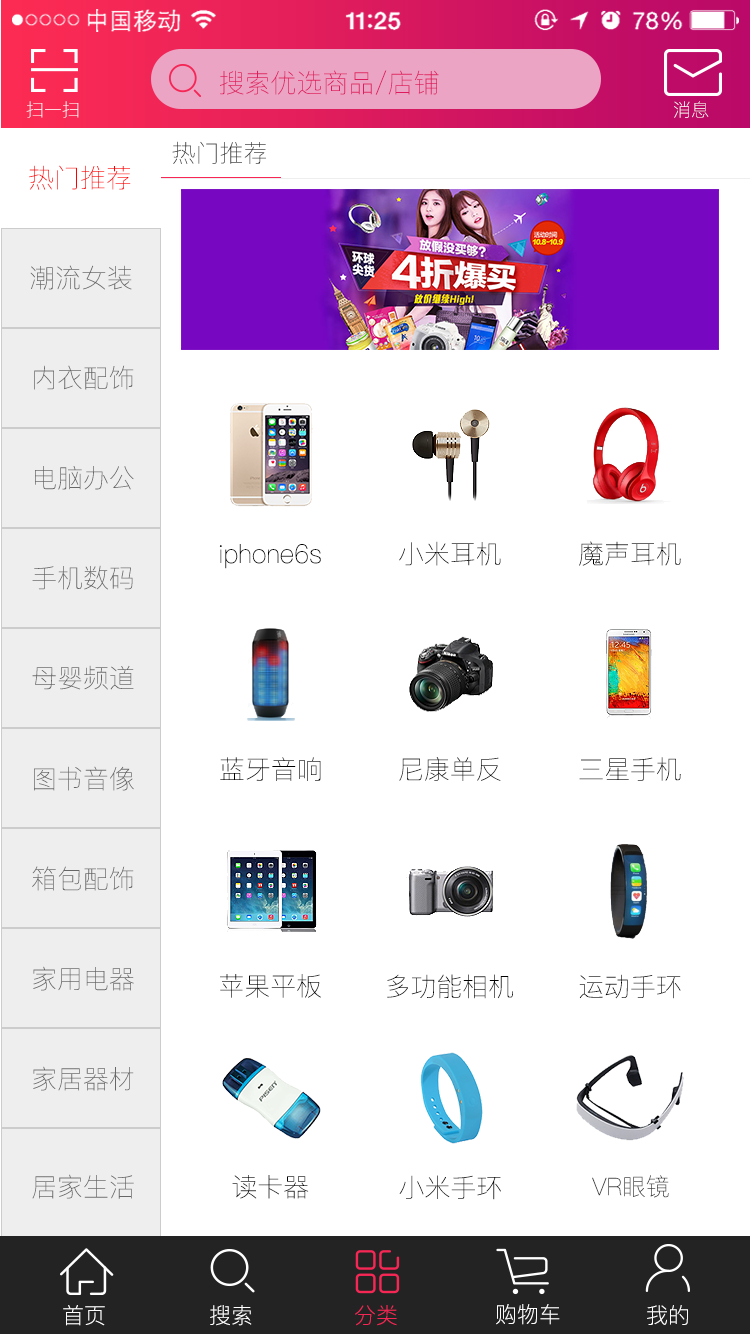
<style>
.page{position:relative;width:750px;height:1334px;background:#ffffff}
.page>*{position:absolute;margin:0}
.t1{font:26px "PingFang-SC-ExtraLight";color:#de1b5d}
.t2{font:18px "PingFang-SC-ExtraLight"}
.t3{font:18px "PingFang-SC-ExtraLight";color:#ffffff}
.t4{font:23.9px "PingFang-SC-ExtraLight";color:#333333}
.t5{font:25.9px "PingFang-SC-ExtraLight";color:#ff0000}
.t6{font:25.9px "PingFang-SC-ExtraLight";color:#666666}
.t7{font:25.9px "PingFang-SC-ExtraLight";color:#000000}
.t8{font:25.9px "PingFang-SC-ExtraLight";color:#232323}
.t9{font:21.9px "PingFang-SC-Light";color:#ffffff}
.t10{font:21.9px "PingFang-SC-Light";color:#f62755}
</style>
<div class="page">
<p class="t1" style="left:220px;top:70px;width:219px;height:25px">搜索优选商品/店铺</p>
<p class="t2" style="left:26px;top:101px;width:53px;height:17px">扫一扫</p>
<p class="t3" style="left:674px;top:101px;width:35px;height:17px">消息</p>
<p class="t4" style="left:172px;top:141px;width:94px;height:23px">热门推荐</p>
<p class="t5" style="left:29px;top:165px;width:102px;height:25px">热门推荐</p>
<p class="t6" style="left:30px;top:265px;width:102px;height:25px">潮流女装</p>
<p class="t6" style="left:34px;top:365px;width:100px;height:25px">内衣配饰</p>
<p class="t6" style="left:35px;top:466px;width:99px;height:24px">电脑办公</p>
<p class="t7" style="left:219px;top:544px;width:102px;height:25px">iphone6s</p>
<p class="t7" style="left:399px;top:541px;width:102px;height:25px">小米耳机</p>
<p class="t7" style="left:579px;top:541px;width:102px;height:25px">魔声耳机</p>
<p class="t6" style="left:32px;top:565px;width:101px;height:25px">手机数码</p>
<p class="t6" style="left:32px;top:665px;width:102px;height:25px">母婴频道</p>
<p class="t7" style="left:220px;top:757px;width:101px;height:24px">蓝牙音响</p>
<p class="t7" style="left:399px;top:757px;width:102px;height:24px">尼康单反</p>
<p class="t8" style="left:579px;top:757px;width:102px;height:24px">三星手机</p>
<p class="t6" style="left:34px;top:766px;width:100px;height:25px">图书音像</p>
<p class="t6" style="left:32px;top:866px;width:102px;height:25px">箱包配饰</p>
<p class="t6" style="left:33px;top:966px;width:101px;height:25px">家用电器</p>
<p class="t7" style="left:220px;top:974px;width:101px;height:24px">苹果平板</p>
<p class="t7" style="left:387px;top:974px;width:126px;height:25px">多功能相机</p>
<p class="t7" style="left:579px;top:974px;width:102px;height:25px">运动手环</p>
<p class="t6" style="left:33px;top:1066px;width:101px;height:25px">家居器材</p>
<p class="t6" style="left:32px;top:1174px;width:102px;height:25px">居家生活</p>
<p class="t7" style="left:232px;top:1175px;width:77px;height:24px">读卡器</p>
<p class="t7" style="left:399px;top:1175px;width:102px;height:25px">小米手环</p>
<p class="t4" style="left:592px;top:1175px;width:77px;height:23px">VR眼镜</p>
<p class="t9" style="left:63px;top:1305px;width:42px;height:21px">首页</p>
<p class="t9" style="left:210px;top:1305px;width:42px;height:21px">搜索</p>
<p class="t10" style="left:355px;top:1305px;width:42px;height:21px">分类</p>
<p class="t9" style="left:496px;top:1304px;width:64px;height:21px">购物车</p>
<p class="t9" style="left:647px;top:1305px;width:41px;height:20px">我的</p>
</div>
